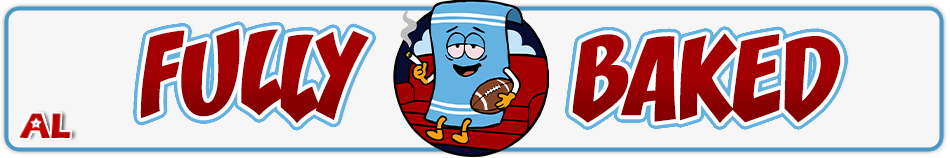
<style>
.page{position:relative;width:950px;height:158px;background:#f6f6f6}
.page>*{position:absolute;margin:0}
.t1{font:103.8px "CCZoinks-Regular";color:#a20002;text-transform:uppercase}
.t2{font:103.8px "CCZoinks-Regular";color:#a00002;text-transform:uppercase}
</style>
<div class="page">
<p class="t1" style="left:140px;top:28px;width:229px;height:96px">Fully</p>
<p class="t2" style="left:572px;top:33px;width:269px;height:90px">Baked</p>
</div>
